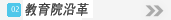
<style>
.page{position:relative;width:171px;height:20px;background:#f4f4f4}
.page>*{position:absolute;margin:0}
.t1{font:14px "New-Gulim";letter-spacing:0.05em;color:#3f3f3f;font-weight:bold;font-style:italic;scale:0.85 1}
</style>
<div class="page">
<p class="t1" style="left:25px;top:2px;width:64px;height:14px">教育院沿革</p>
</div>
